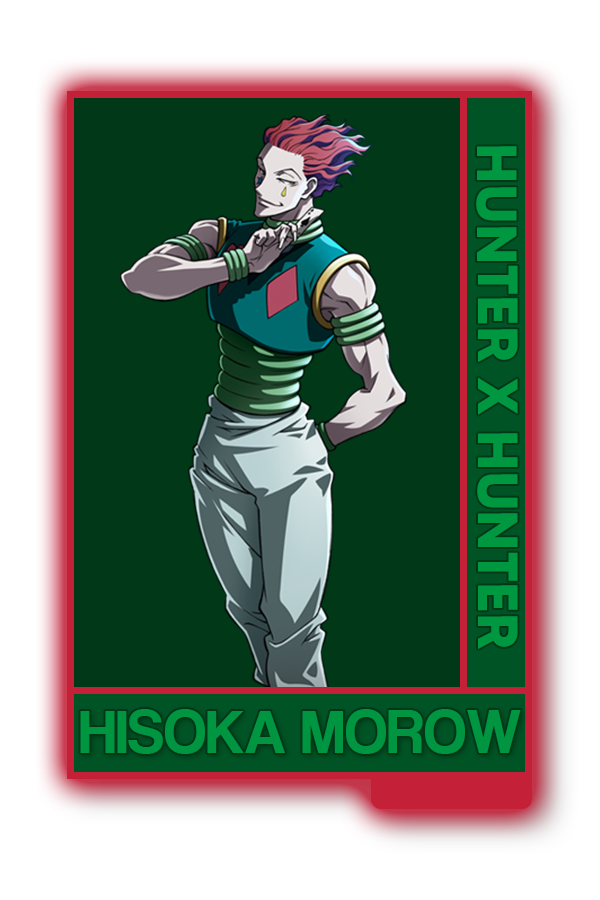
<style>
.page{position:relative;width:600px;height:900px;background:#003818}
.page>*{position:absolute;margin:0}
.t1{font:56.5px "MADETOMMY-Bold";color:#009741}
.t2{font:63.5px "CoolveticaRg-Regular";color:#009641}
</style>
<div class="page">
<p class="t1" style="left:476px;top:146px;width:42px;height:503px;rotate:90deg">HUNTER X HUNTER</p>
<p class="t2" style="left:80px;top:709px;width:441px;height:45px">HISOKA MOROW</p>
</div>
